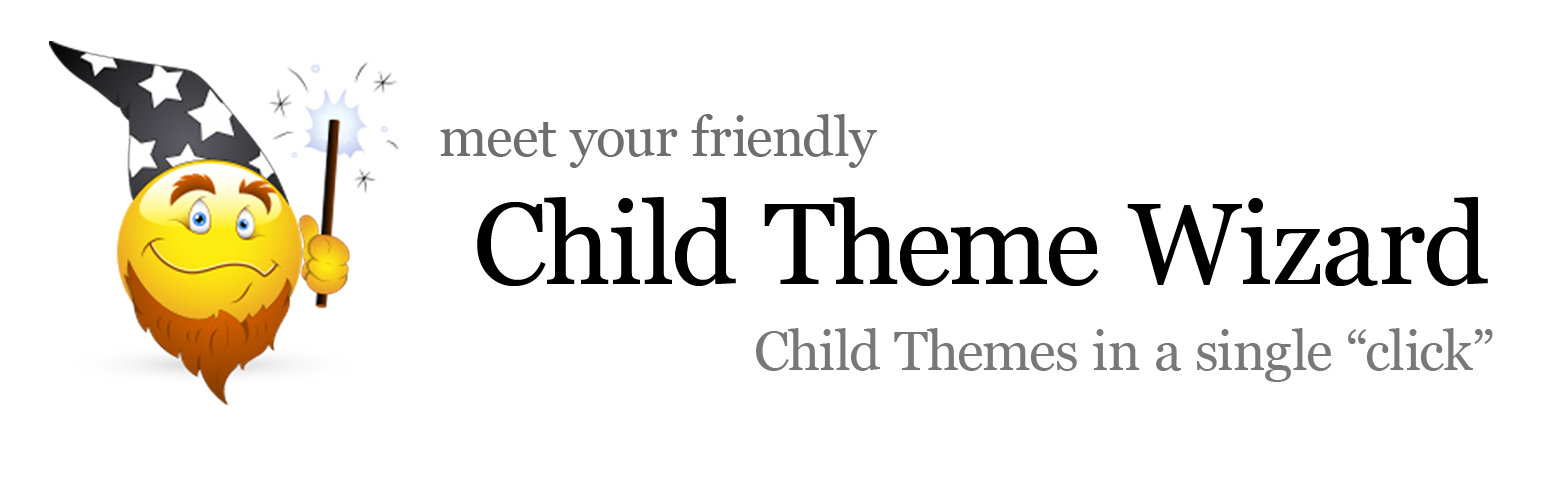
<style>
.page{position:relative;width:1544px;height:500px;background:#ffffff}
.page>*{position:absolute;margin:0}
.t1{font:55px "Georgia";color:#6e6e6e}
.t2{font:115px "Georgia";color:#000000}
.t3{font:55px "Georgia";color:#787878}
</style>
<div class="page">
<p class="t1" style="left:440px;top:114px;width:437px;height:54px">meet your friendly</p>
<p class="t2" style="left:477px;top:197px;width:1011px;height:89px">Child Theme Wizard</p>
<p class="t3" style="left:756px;top:328px;width:737px;height:54px">Child Themes in a single “click”</p>
</div>
